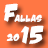
<style>
.page{position:relative;width:48px;height:48px;background:#ff7744}
.page>*{position:absolute;margin:0}
.t1{font:25px "DamnNoisyKids";color:#ffffff;text-transform:uppercase}
.t2{font:10px "DamnNoisyKids";color:#ffffff;text-transform:uppercase}
</style>
<div class="page">
<p class="t1" style="left:4px;top:3px;width:14px;height:19px">F</p>
<p class="t2" style="left:14px;top:14px;width:28px;height:8px">allas</p>
<p class="t1" style="left:20px;top:25px;width:24px;height:19px">15</p>
<p class="t2" style="left:6px;top:33px;width:14px;height:8px">20</p>
</div>
